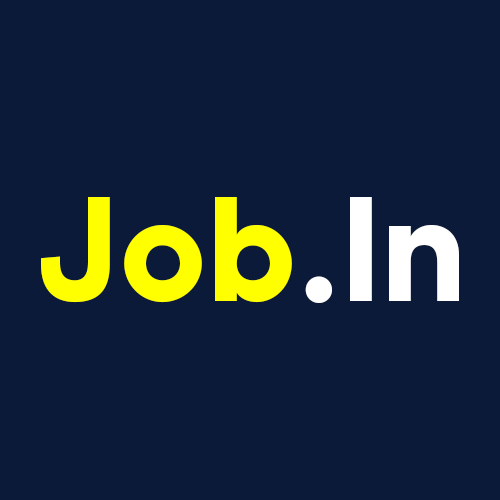
<style>
.page{position:relative;width:500px;height:500px;background:#0b1a39}
.page>*{position:absolute;margin:0}
.t1{font:149.2px "Antapani-ExtraBold";color:#ffff00}
.t2{font:149.2px "Antapani-ExtraBold";color:#ffffff}
</style>
<div class="page">
<p class="t1" style="left:41px;top:197px;width:418px;height:106px">Job<span class="t2">.In</span></p>
</div>
